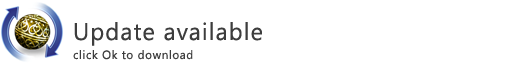
<style>
.page{position:relative;width:512px;height:64px;background:#ffffff}
.page>*{position:absolute;margin:0}
.t1{font:12px/19px "SegoeUI";letter-spacing:0.05em;color:#3d3d3d}
.t2{font:24px/25px "SegoeUI";letter-spacing:0.05em;color:#3d3d3d}
</style>
<div class="page">
<p class="t1" style="left:73px;top:22px;width:189px;height:38px"><span class="t2">Update available<br></span>click Ok to download</p>
</div>
